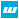
<style>
.page{position:relative;width:19px;height:19px;background:#00a9da}
.page>*{position:absolute;margin:0}
.t1{font:18px "Magneto-Bold";letter-spacing:-0.05em;color:#ffffff}
</style>
<div class="page">
<p class="t1" style="left:3px;top:7px;width:15px;height:6px">w</p>
</div>
